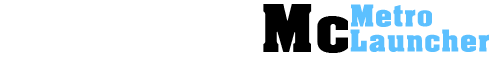
<style>
.page{position:relative;width:493px;height:58px;background:#ffffff}
.page>*{position:absolute;margin:0}
.t1{font:62.5px "AcmeFont";letter-spacing:0.02em;color:#000000}
.t2{font:29.1px "AcmeFont";letter-spacing:0.02em;color:#5cc0ff}
</style>
<div class="page">
<p class="t1" style="left:263px;top:4px;width:85px;height:49px">Mc</p>
<p class="t2" style="left:351px;top:4px;width:81px;height:23px">Metro</p>
<p class="t2" style="left:350px;top:29px;width:139px;height:23px">Launcher</p>
</div>
